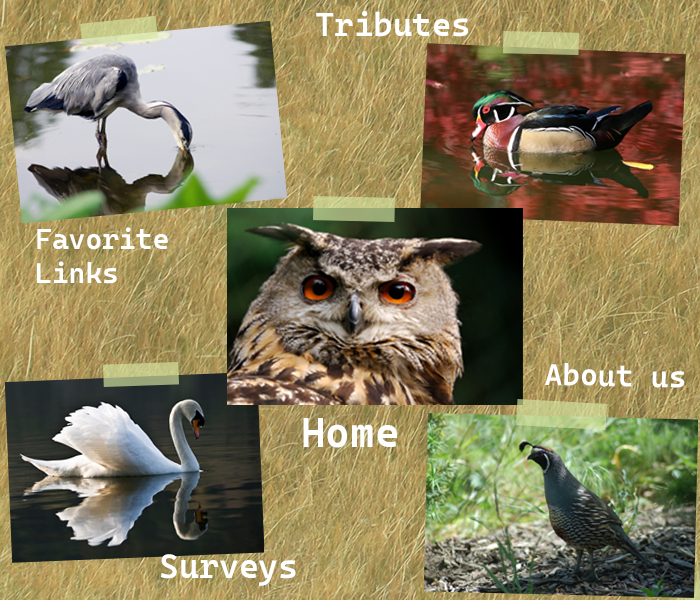
<style>
.page{position:relative;width:700px;height:600px}
.page>*{position:absolute;margin:0}
.t1{font:33.2px "CascadiaCodeRoman-SemiBold";color:#ffffff;font-weight:bold}
.t2{font:28.6px "CascadiaCodeRoman-SemiBold";color:#ffffff;font-weight:bold}
.t3{font:30.2px "CascadiaCodeRoman-SemiBold";color:#ffffff;font-weight:bold}
.t4{font:41.9px "CascadiaCodeRoman-SemiBold";color:#ffffff;font-weight:bold}
.t5{font:33.9px "CascadiaCodeRoman-SemiBold";color:#ffffff;font-weight:bold}
</style>
<div class="page">
<p class="t1" style="left:316px;top:11px;width:152px;height:26px">Tributes</p>
<p class="t2" style="left:37px;top:227px;width:131px;height:57px">Favorite Links</p>
<p class="t3" style="left:545px;top:363px;width:140px;height:25px;rotate:1deg">About us</p>
<p class="t4" style="left:303px;top:418px;width:94px;height:30px">Home</p>
<p class="t5" style="left:161px;top:554px;width:135px;height:32px">Surveys</p>
</div>
